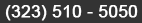
<style>
.page{position:relative;width:142px;height:23px;background:#333333}
.page>*{position:absolute;margin:0}
.t1{font:17px "ArialMT";color:#ffffff;font-weight:bold}
</style>
<div class="page">
<p class="t1" style="left:5px;top:5px;width:133px;height:16px">(323) 510 - 5050</p>
</div>
